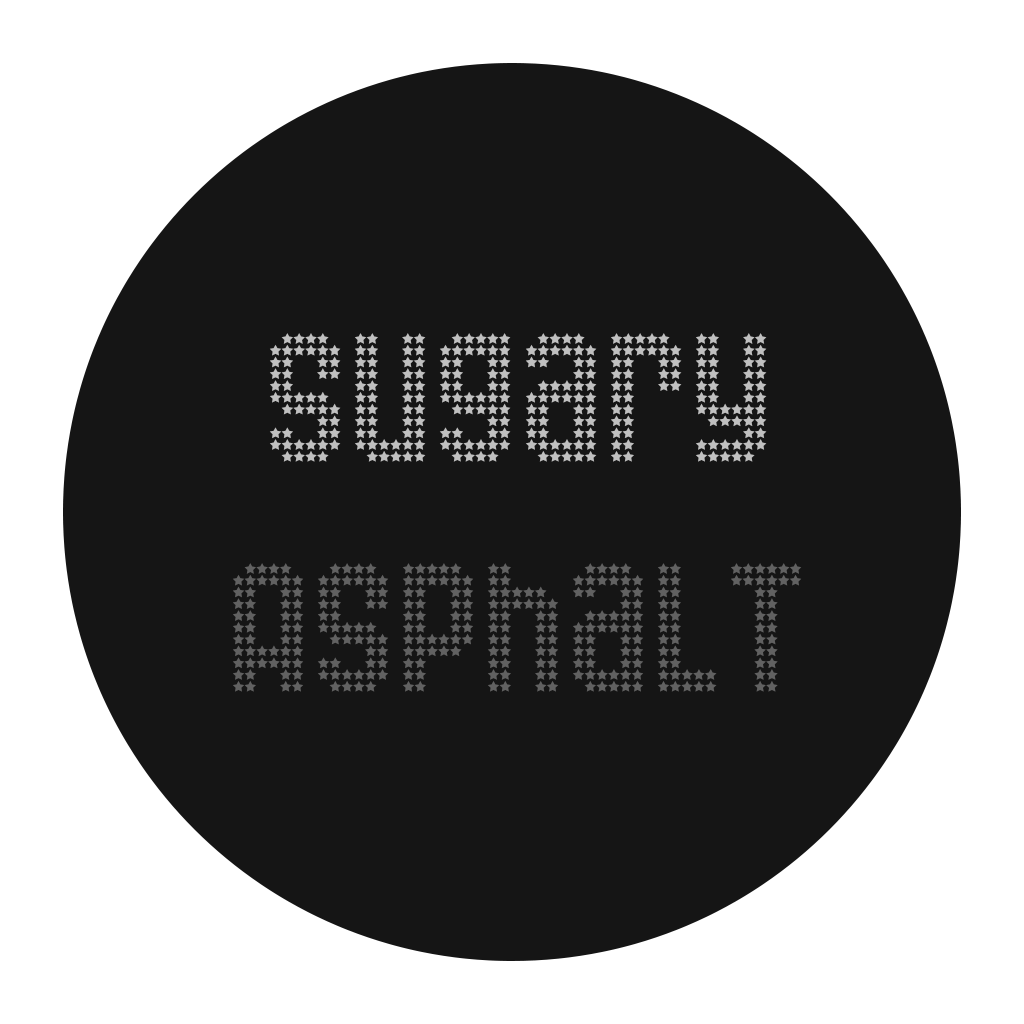
<style>
.page{position:relative;width:1024px;height:1024px;background:#151515}
.page>*{position:absolute;margin:0}
.t1{font:164px "Queer";color:#c0c0c0}
.t2{font:164px "Queer";color:#616161}
</style>
<div class="page">
<p class="t1" style="left:269px;top:333px;width:498px;height:129px">SugarY</p>
<p class="t2" style="left:232px;top:563px;width:570px;height:129px">AsphalT</p>
</div>
